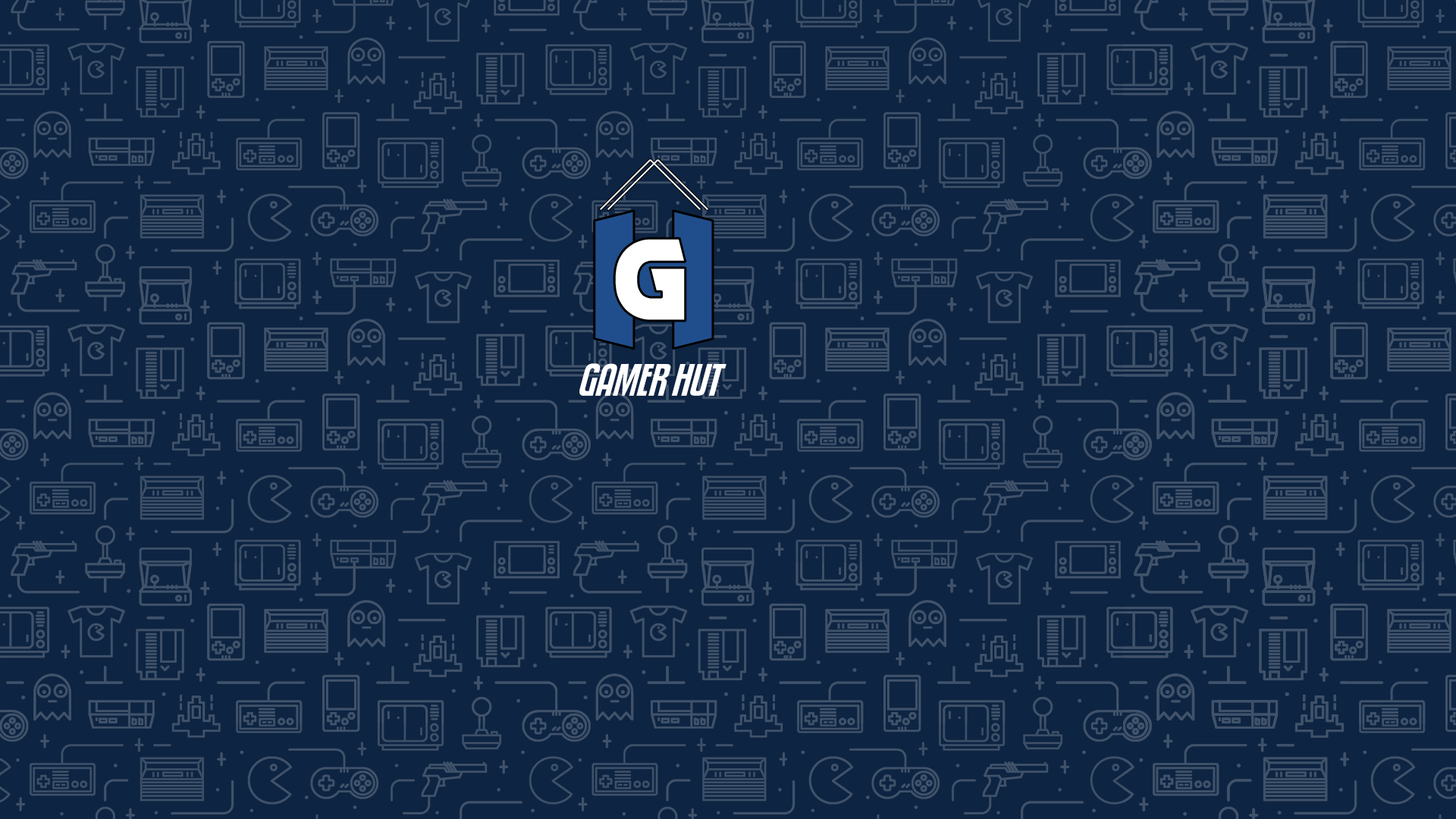
<style>
.page{position:relative;width:1456px;height:819px;background:#0d2442}
.page>*{position:absolute;margin:0}
.t1{font:151.7px "KickflipBRK";color:#ffffff}
.t2{font:43px "KenyanCoffee-Italic";color:#ffffff;scale:1.27 1}
</style>
<div class="page">
<p class="t1" style="left:614px;top:238px;width:72px;height:83px">G</p>
<p class="t2" style="left:579px;top:363px;width:147px;height:33px">GAMER HUT</p>
</div>
